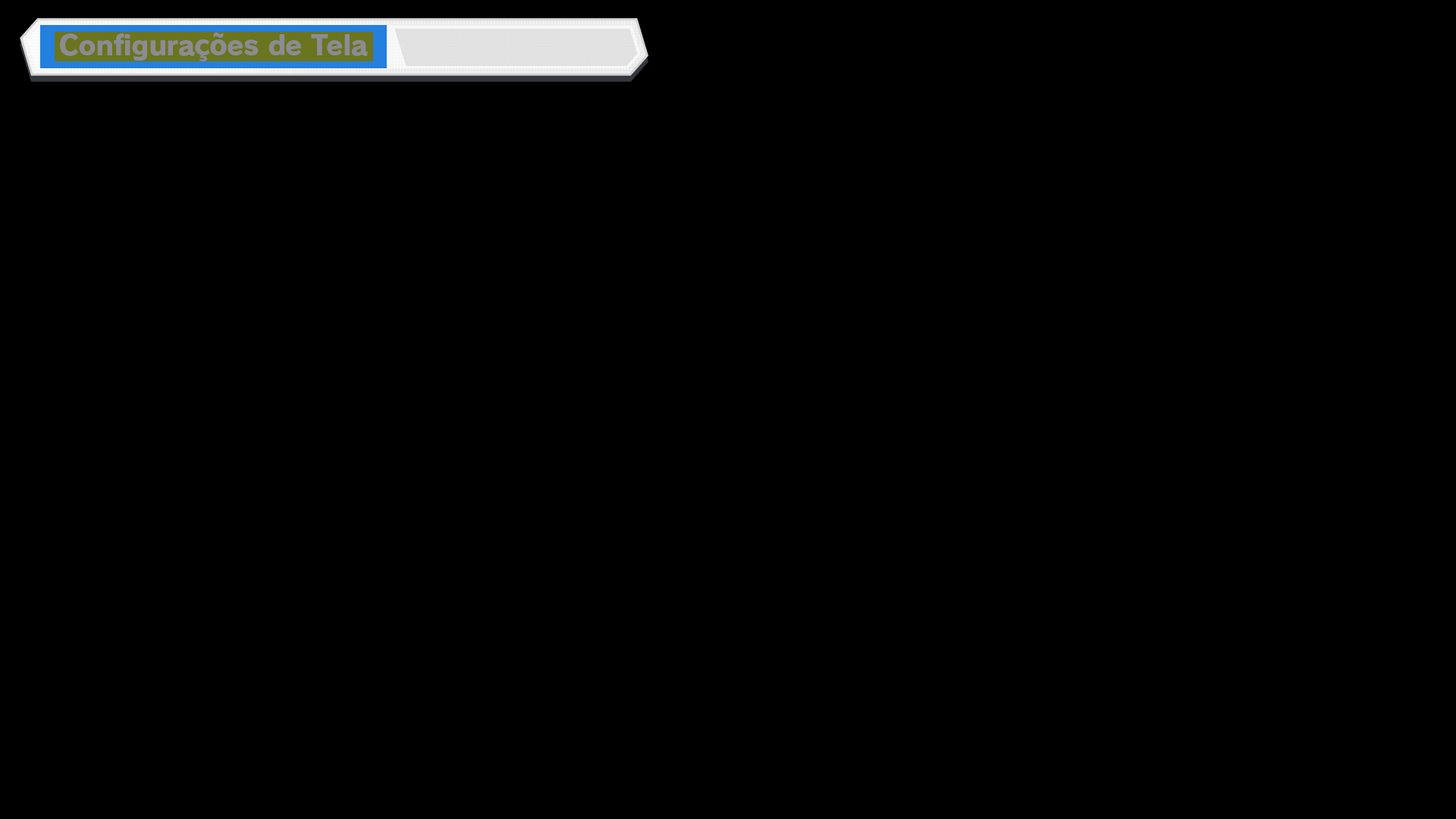
<style>
.page{position:relative;width:1456px;height:819px;background:#000000}
.page>*{position:absolute;margin:0}
.t1{font:27.3px "RodinPro-EB";letter-spacing:-0.02em;color:#8b8c92}
</style>
<div class="page">
<p class="t1" style="left:60px;top:32px;width:308px;height:29px">Configurações de Tela</p>
</div>
